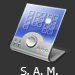
<style>
.page{position:relative;width:75px;height:75px;background:#333333}
.page>*{position:absolute;margin:0}
.t1{font:11px "Tahoma";color:#ffffff}
</style>
<div class="page">
<p class="t1" style="left:20px;top:67px;width:38px;height:8px">S. A. M.</p>
</div>
